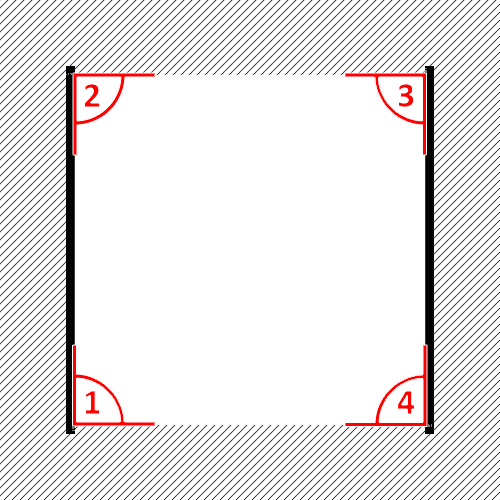
<style>
.page{position:relative;width:500px;height:500px;background:#ffffff}
.page>*{position:absolute;margin:0}
.t1{font:36px "Calibri-Bold"}
.t2{font:36px "Calibri-Bold";color:#ff0000}
</style>
<div class="page">
<p class="t1" style="left:84px;top:84px;width:16px;height:23px">2</p>
<p class="t1" style="left:398px;top:84px;width:16px;height:23px">3</p>
<p class="t1" style="left:85px;top:391px;width:15px;height:23px">1</p>
<p class="t2" style="left:397px;top:391px;width:18px;height:23px">4</p>
</div>
